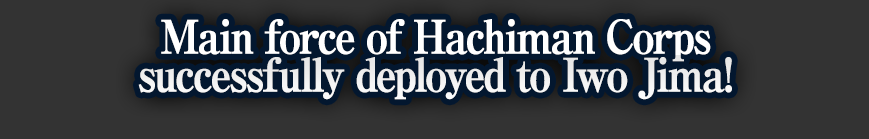
<style>
.page{position:relative;width:869px;height:139px;background:#333333}
.page>*{position:absolute;margin:0}
.t1{font:46px/38px "RyuminPro-ExBold";letter-spacing:-0.08em;color:#ffffff;font-weight:bold;scale:0.9 1}
</style>
<div class="page">
<p class="t1" style="left:138px;top:19px;width:594px;height:81px;text-align:center">Main force of Hachiman Corps<br>successfully deployed to Iwo Jima!</p>
</div>
